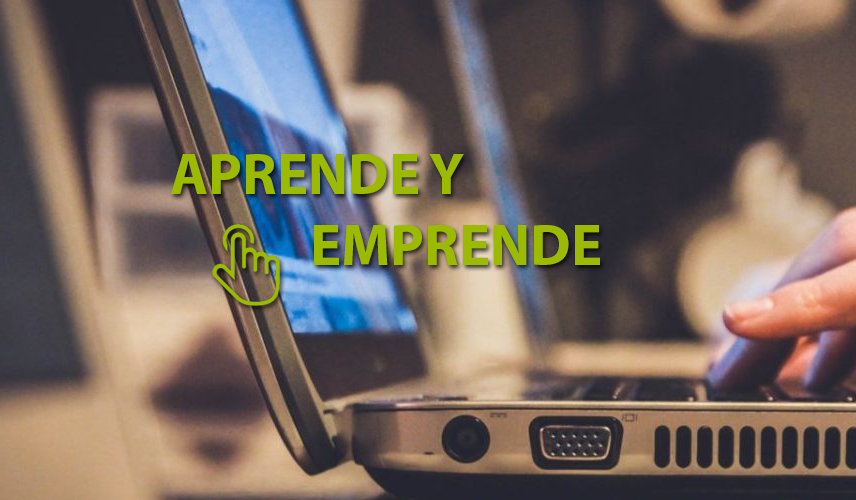
<style>
.page{position:relative;width:856px;height:500px}
.page>*{position:absolute;margin:0}
.t1{font:58.9px "MyriadPro-Bold";color:#9bba00}
</style>
<div class="page">
<p class="t1" style="left:171px;top:154px;width:429px;height:111px">APRENDE Y <br>  EMPRENDE</p>
</div>
